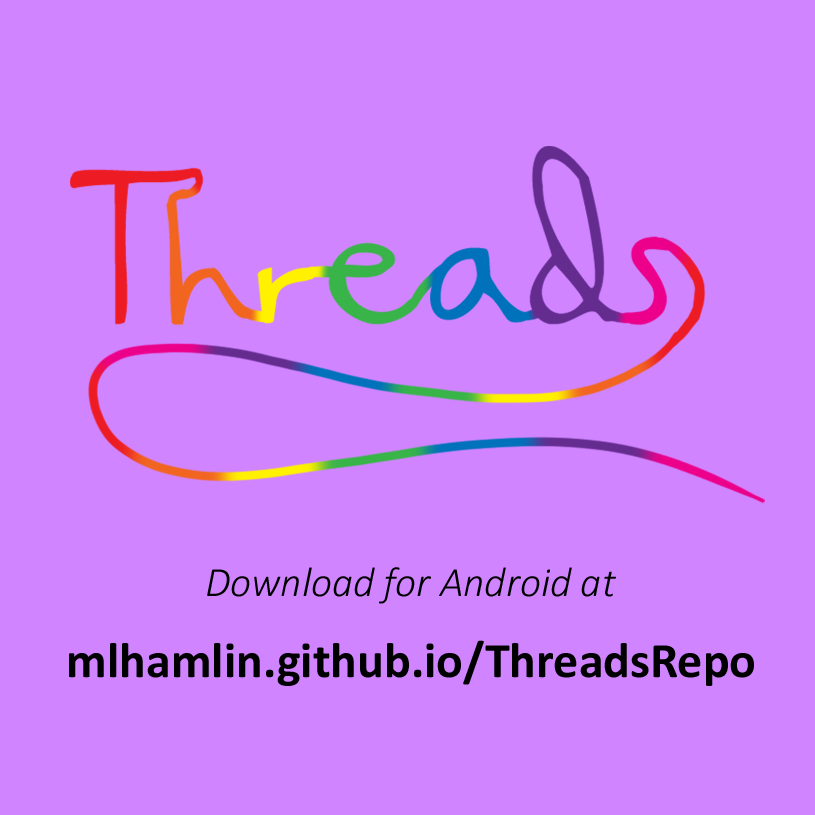
<style>
.page{position:relative;width:815px;height:815px;background:#d084ff}
.page>*{position:absolute;margin:0}
.t1{font:41.7px "Calibri-LightItalic";color:#000000}
.t2{font:50px "Calibri-Bold";color:#000000}
</style>
<div class="page">
<p class="t1" style="left:207px;top:567px;width:409px;height:37px">Download for Android at</p>
<p class="t2" style="left:69px;top:640px;width:685px;height:46px">mlhamlin.github.io/ThreadsRepo</p>
</div>
